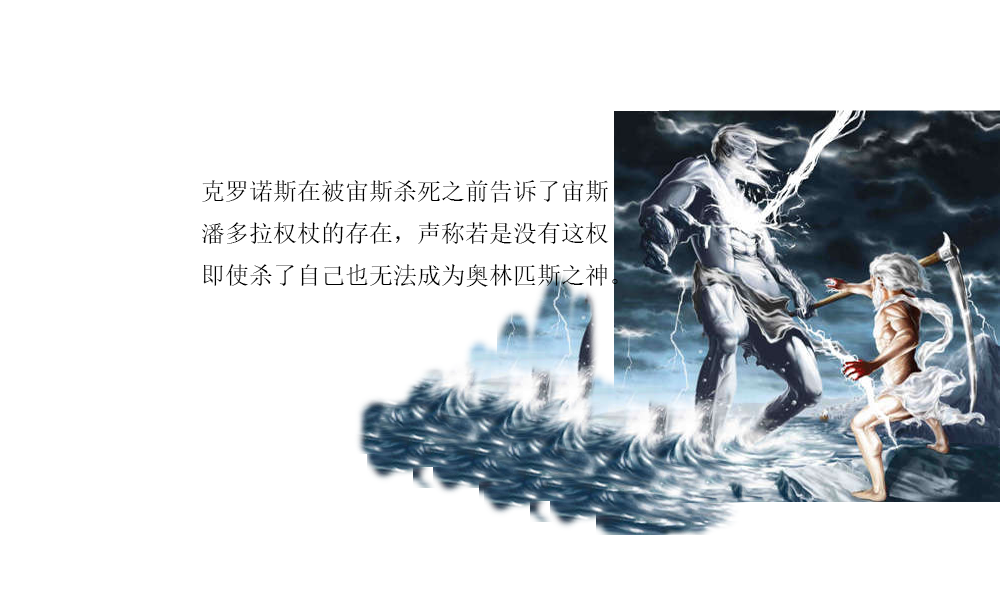
<style>
.page{position:relative;width:1000px;height:600px;background:#ffffff}
.page>*{position:absolute;margin:0}
.t1{font:24px "SimSun";color:#000000}
</style>
<div class="page">
<p class="t1" style="left:202px;top:180px;width:416px;height:107px">克罗诺斯在被宙斯杀死之前告诉了宙斯<br>潘多拉权杖的存在，声称若是没有这权<br>即使杀了自己也无法成为奥林匹斯之神。</p>
</div>
